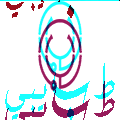
<style>
.page{position:relative;width:120px;height:120px;background:#ffffff}
.page>*{position:absolute;margin:0}
.t1{font:48.3px "AXtZeinaLight";color:#19ffff;scale:0.62 1}
.t2{font:86.9px "AXtZeinaLight";color:#19ffff;scale:0.62 1}
</style>
<div class="page">
<p class="t1" style="left:5px;top:62px;width:110px;height:57px">ط<span class="t2">ب</span>يبي</p>
</div>
